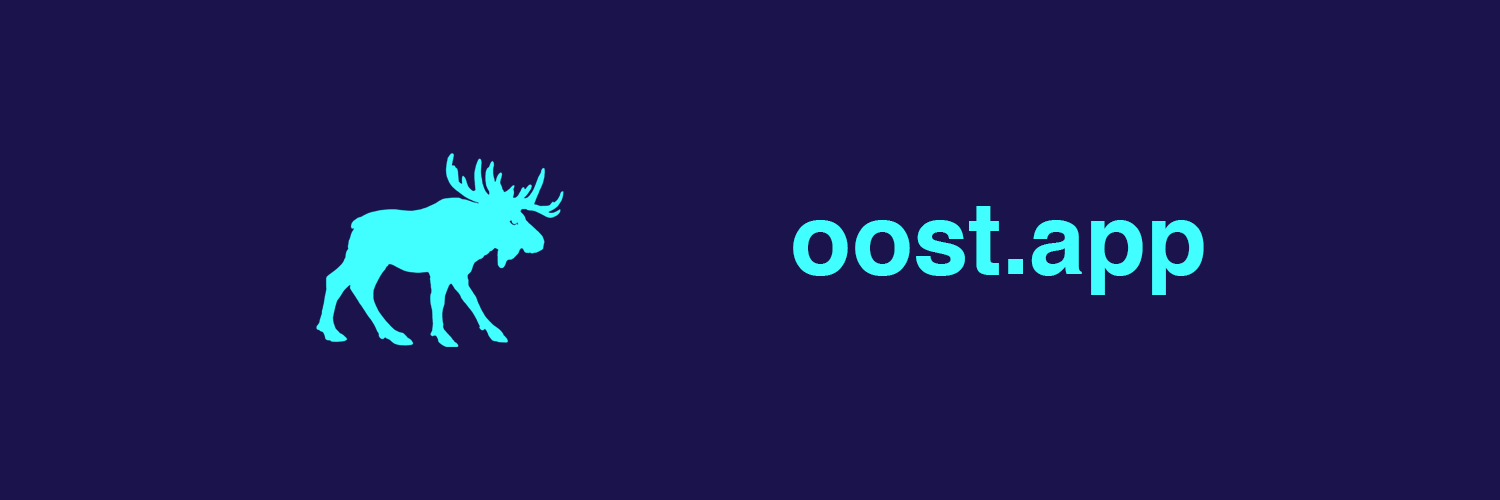
<style>
.page{position:relative;width:1500px;height:500px;background:#1a134c}
.page>*{position:absolute;margin:0}
.t1{font:100px "Helvetica-Bold";color:#41ffff}
</style>
<div class="page">
<p class="t1" style="left:793px;top:206px;width:411px;height:89px">oost.app</p>
</div>
